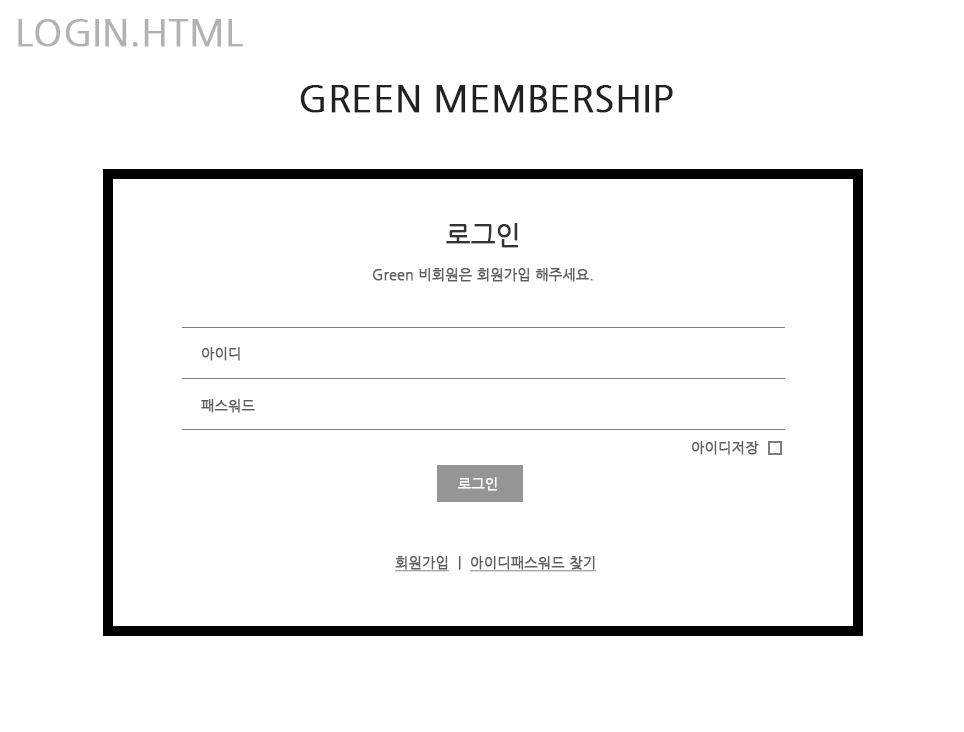
<style>
.page{position:relative;width:964px;height:732px;background:#ffffff}
.page>*{position:absolute;margin:0}
.t1{font:36px "NanumGothic";color:#b2b2b2;font-weight:bold}
.t2{font:36px "NanumGothic";color:#212121;font-weight:bold}
.t3{font:14px/36px "NanumGothic";color:#5e5e5e;font-weight:bold}
.t4{font:26px/36px "NanumGothic";color:#333333;font-weight:bold}
.t5{font:14px/52px "NanumGothic";color:#5e5e5e;font-weight:bold}
.t6{font:14px "NanumGothic";color:#5e5e5e;font-weight:bold}
.t7{font:14px "NanumGothic";color:#ffffff;font-weight:bold}
.t8{font:14px "NanumGothic";color:#5e5e5e;font-weight:bold;text-decoration:underline}
</style>
<div class="page">
<p class="t1" style="left:18px;top:19px;width:225px;height:28px">LOGIN.HTML</p>
<p class="t2" style="left:300px;top:85px;width:373px;height:28px">GREEN MEMBERSHIP</p>
<p class="t3" style="left:373px;top:223px;width:220px;height:59px;text-align:center"><span class="t4">로그인<br></span>Green 비회원은 회원가입 해주세요.</p>
<p class="t5" style="left:201px;top:347px;width:54px;height:66px">아이디<br>패스워드</p>
<p class="t6" style="left:692px;top:441px;width:67px;height:14px">아이디저장</p>
<p class="t7" style="left:458px;top:477px;width:39px;height:14px">로그인</p>
<p class="t8" style="left:395px;top:556px;width:202px;height:16px">회원가입<span class="t6">  |  </span>아이디패스워드 찾기</p>
</div>
